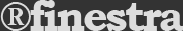
<style>
.page{position:relative;width:183px;height:31px;background:#333333}
.page>*{position:absolute;margin:0}
.t1{font:43px "BookmanOldStyle-Bold";letter-spacing:-0.06em;color:#dddddd}
</style>
<div class="page">
<p class="t1" style="left:0px;top:0px;width:184px;height:31px">®finestra</p>
</div>
